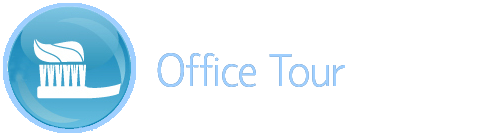
<style>
.page{position:relative;width:500px;height:135px;background:#ffffff}
.page>*{position:absolute;margin:0}
.t1{font:45.8px "HattoriHanzo-Light";color:#9fcfff}
</style>
<div class="page">
<p class="t1" style="left:157px;top:53px;width:188px;height:34px">Office Tour</p>
<p class="t1" style="left:157px;top:53px;width:188px;height:34px">Office Tour</p>
</div>
